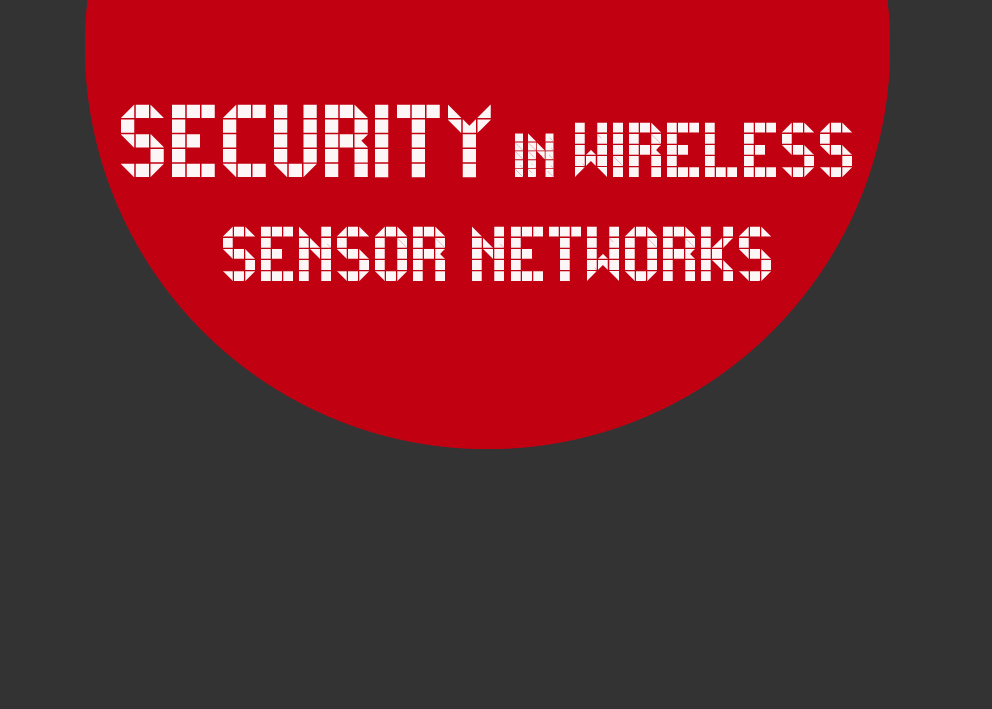
<style>
.page{position:relative;width:992px;height:709px;background:#333333}
.page>*{position:absolute;margin:0}
.t1{font:86.4px "Belfast";color:#fefefe;text-transform:uppercase}
.t2{font:115.2px "Belfast";color:#fefefe;text-transform:uppercase}
.t3{font:69.1px "Belfast";color:#fefefe;text-transform:uppercase}
</style>
<div class="page">
<p class="t1" style="left:121px;top:104px;width:731px;height:177px;text-align:center;opacity:0.97"><span class="t2">Security</span><span class="t3"> in </span>Wireless<br> Sensor Networks</p>
</div>
